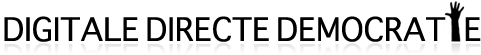
<style>
.page{position:relative;width:481px;height:55px;background:#ffffff}
.page>*{position:absolute;margin:0}
.t1{font:31.2px "Sathu";color:#000000}
</style>
<div class="page">
<p class="t1" style="left:4px;top:16px;width:477px;height:26px">DIGITALE DIRECTE DEMOCRAT   E</p>
</div>
